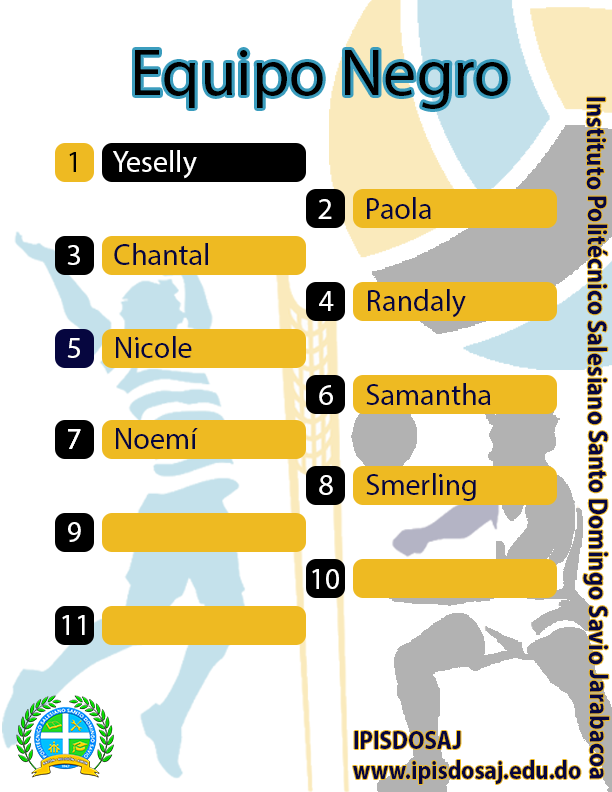
<style>
.page{position:relative;width:612px;height:792px;background:#ffffff}
.page>*{position:absolute;margin:0}
.t1{font:66.3px "MyriadPro-Regular";color:#000000}
.t2{font:27.2px "MyriadPro-Bold";color:#06063f;scale:0.9 1}
.t3{font:30px "MyriadPro-Regular";color:#ffffff}
.t4{font:30px "MyriadPro-Regular";color:#000000}
.t5{font:30px "MyriadPro-Regular";color:#06063f}
.t6{font:25.6px "MyriadPro-Bold";color:#06063f;scale:0.9 1}
</style>
<div class="page">
<p class="t1" style="left:135px;top:50px;width:373px;height:59px">Equipo Negro</p>
<p class="t2" style="left:583px;top:97px;width:27px;height:682px;rotate:90deg">Instituto Politécnico Salesiano Santo Domingo Savio Jarabacoa</p>
<p class="t3" style="left:69px;top:150px;width:128px;height:29px"><span class="t4">1     </span>Yeselly</p>
<p class="t5" style="left:318px;top:197px;width:113px;height:22px"><span class="t3">2     </span>Paola</p>
<p class="t5" style="left:67px;top:243px;width:141px;height:22px"><span class="t3">3    </span> Chantal</p>
<p class="t5" style="left:319px;top:289px;width:147px;height:29px"><span class="t3">4     </span>Randaly</p>
<p class="t5" style="left:67px;top:336px;width:125px;height:22px"><span class="t3">5    </span> Nicole</p>
<p class="t5" style="left:319px;top:383px;width:172px;height:22px"><span class="t3">6     </span>Samantha</p>
<p class="t5" style="left:68px;top:428px;width:130px;height:21px"><span class="t3">7    </span> Noemí</p>
<p class="t3" style="left:68px;top:429px;width:13px;height:20px">7</p>
<p class="t5" style="left:319px;top:473px;width:157px;height:28px"><span class="t3">8     </span>Smerling</p>
<p class="t3" style="left:68px;top:522px;width:13px;height:20px">9</p>
<p class="t3" style="left:312px;top:569px;width:27px;height:20px">10</p>
<p class="t3" style="left:62px;top:615px;width:23px;height:20px">11</p>
<p class="t6" style="left:353px;top:731px;width:228px;height:53px">IPISDOSAJ<br>www.ipisdosaj.edu.do</p>
</div>
